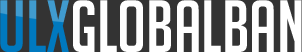
<style>
.page{position:relative;width:302px;height:52px;background:#333333}
.page>*{position:absolute;margin:0}
.t1{font:72px "BigNoodleTitling";color:#ffffff}
.t2{font:72px "BigNoodleTitling";color:#0079bf}
</style>
<div class="page">
<p class="t1" style="left:0px;top:0px;width:302px;height:52px"><span class="t2">ULX</span>GlobalBan</p>
</div>
